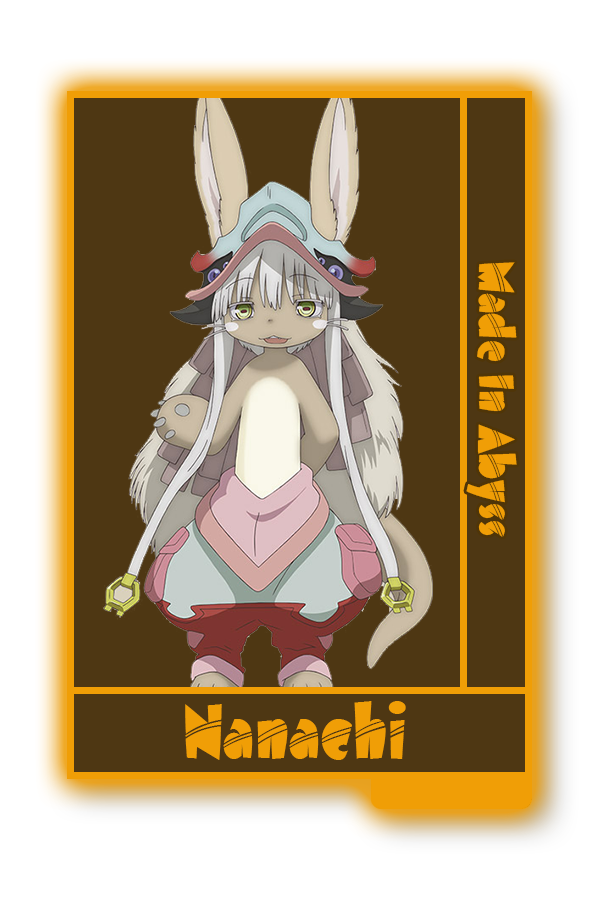
<style>
.page{position:relative;width:600px;height:900px;background:#4e3713}
.page>*{position:absolute;margin:0}
.t1{font:48.8px "AirmoleStripe";color:#f09e06}
.t2{font:75px "AirmoleStripe";color:#f09e06}
</style>
<div class="page">
<p class="t1" style="left:466px;top:262px;width:51px;height:275px;rotate:90deg">Made In Abyss</p>
<p class="t2" style="left:185px;top:701px;width:221px;height:59px">Nanachi</p>
</div>
